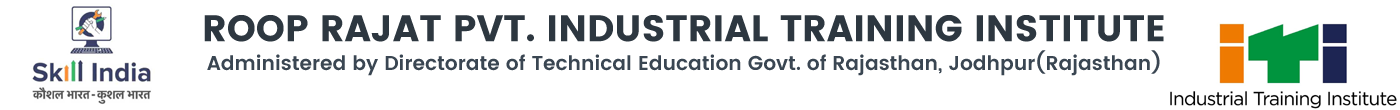
<style>
.page{position:relative;width:1400px;height:110px;background:#ffffff}
.page>*{position:absolute;margin:0}
.t1{font:20px "Poppins-SemiBold";color:#3a4652}
.t2{font:37px "Poppins";color:#2d3740}
.t3{font:60px "TwCenMT-CondensedExtraBold";color:#000000}
</style>
<div class="page">
<p class="t1" style="left:204px;top:15px;width:960px;height:61px;text-align:center"><span class="t2">ROOP RAJAT PVT. INDUSTRIAL TRAINING INSTITUTE<br></span>Administered by Directorate of Technical Education Govt. of Rajasthan, Jodhpur(Rajasthan) <br><span class="t3">INSTITUTE</span></p>
</div>
